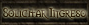
<style>
.page{position:relative;width:89px;height:25px}
.page>*{position:absolute;margin:0}
.t1{font:11.5px "Morpheus"}
</style>
<div class="page">
<p class="t1" style="left:3px;top:7px;width:84px;height:12px">Solicitar Ingreso</p>
</div>
